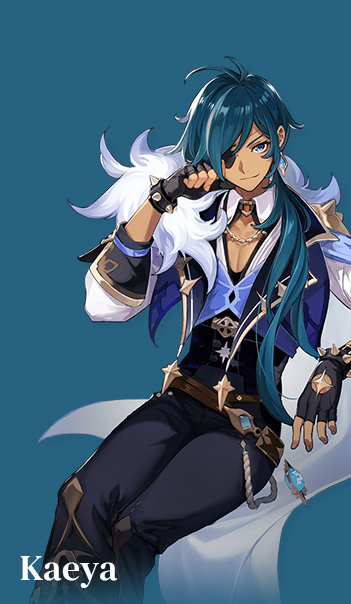
<style>
.page{position:relative;width:351px;height:604px;background:#276381}
.page>*{position:absolute;margin:0}
.t1{font:36.4px "DMSerifText-Regular";color:#ffffff}
</style>
<div class="page">
<p class="t1" style="left:20px;top:556px;width:98px;height:32px">Kaeya</p>
</div>
